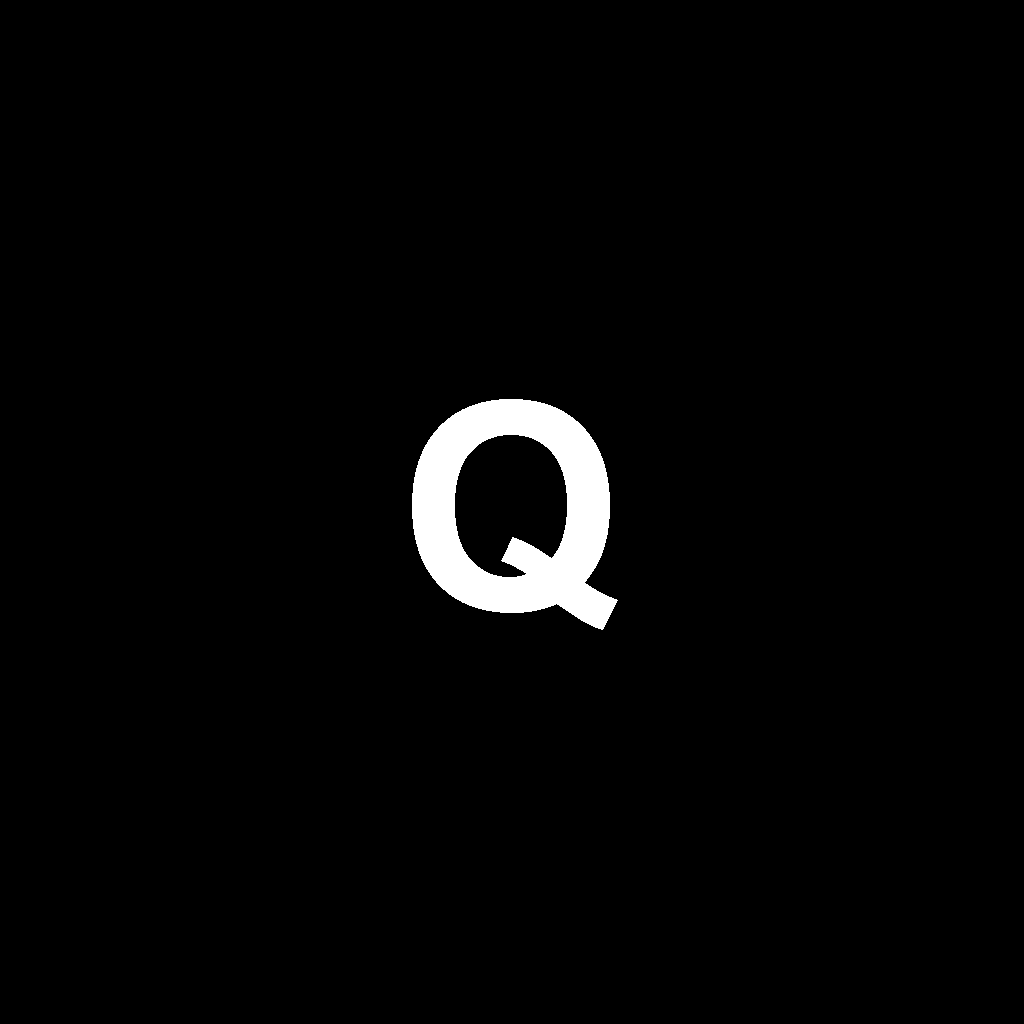
<style>
.page{position:relative;width:1024px;height:1024px;background:#000000}
.page>*{position:absolute;margin:0}
.t1{font:287.5px "Arial-BoldMT";color:#ffffff}
</style>
<div class="page">
<p class="t1" style="left:412px;top:399px;width:206px;height:231px">Q</p>
</div>
